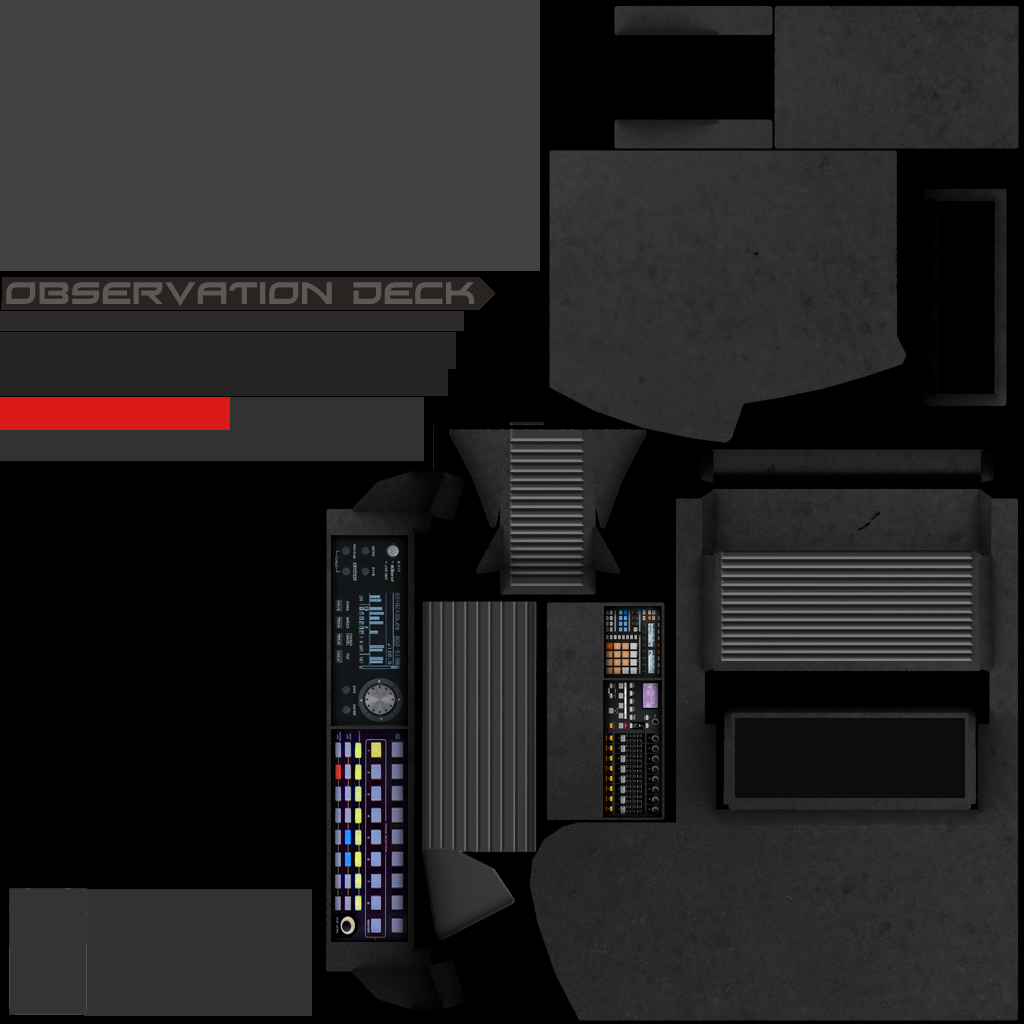
<style>
.page{position:relative;width:1024px;height:1024px;background:#000000}
.page>*{position:absolute;margin:0}
.t1{font:29px "Xirod";color:#5d5756}
</style>
<div class="page">
<p class="t1" style="left:6px;top:282px;width:469px;height:24px">OBSERVATION DECK</p>
</div>
